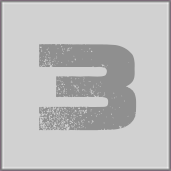
<style>
.page{position:relative;width:171px;height:171px;background:#d1d1d1}
.page>*{position:absolute;margin:0}
.t1{font:121px "Coalition";color:#8f8f8f}
</style>
<div class="page">
<p class="t1" style="left:38px;top:44px;width:99px;height:87px">3</p>
<p class="t1" style="left:38px;top:44px;width:99px;height:87px">3</p>
<p class="t1" style="left:38px;top:44px;width:99px;height:87px">3</p>
</div>
